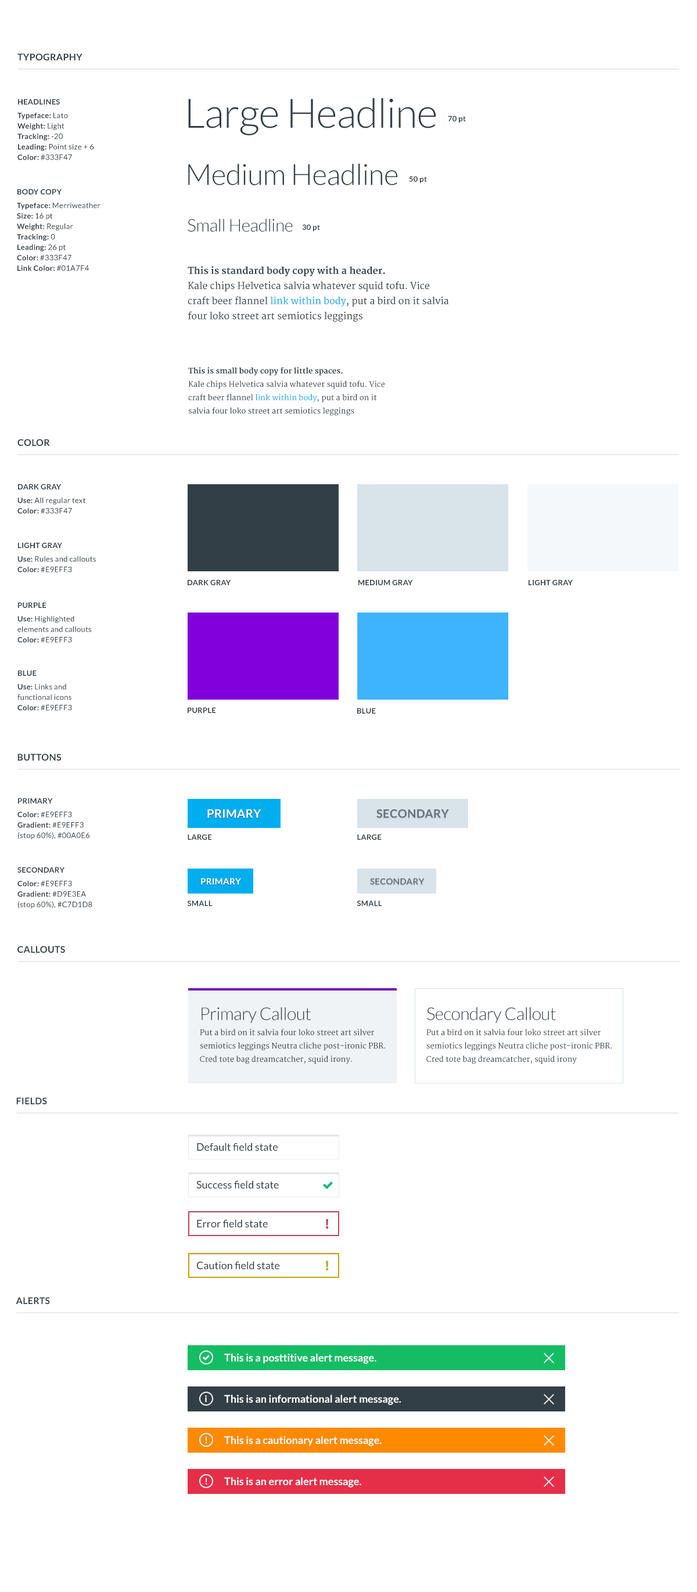
<style>
.page{position:relative;width:697px;height:1592px;background:#ffffff}
.page>*{position:absolute;margin:0}
.t1{font:9.3px "Lato-Bold";letter-spacing:0.02em;color:#333f47;text-transform:uppercase}
.t2{font:7.5px/10.5px "Lato-Regular";letter-spacing:0.02em;color:#333f47}
.t3{font:7.5px/10.5px "Lato-Bold";letter-spacing:0.02em;color:#333f47;text-transform:uppercase}
.t4{font:7.5px/10.5px "Lato-Bold";letter-spacing:0.02em;color:#333f47}
.t5{font:7.5px/10.5px "Lato-Regular";letter-spacing:0.02em;color:#333f47;text-transform:uppercase}
.t6{font:40.6px "Lato-Light";letter-spacing:-0.015em;color:#333f47}
.t7{font:7.5px "Lato-Bold";letter-spacing:0.02em;color:#333f47}
.t8{font:29px "Lato-Light";letter-spacing:-0.015em;color:#333f47}
.t9{font:17.4px "Lato-Light";letter-spacing:-0.015em;color:#333f47}
.t10{font:9.3px/15.1px "Merriweather";color:#333f47}
.t11{font:9.3px/15.1px "Merriweather-Bold";color:#333f47}
.t12{font:9.3px/15.1px "Merriweather";color:#01a7f4}
.t13{font:7.5px/13.4px "Merriweather";color:#333f47}
.t14{font:7.5px/13.4px "Merriweather-Bold";color:#333f47}
.t15{font:7.5px/13.4px "Merriweather";color:#01a7f4}
.t16{font:7.5px "Lato-Bold";letter-spacing:0.02em;color:#333f47;text-transform:uppercase}
.t17{font:11.6px "Lato-Bold";letter-spacing:0.02em;color:#ffffff;text-transform:uppercase}
.t18{font:11.6px "Lato-Bold";letter-spacing:0.02em;color:#66737c;text-transform:uppercase}
.t19{font:8.7px "Lato-Bold";letter-spacing:0.02em;color:#ffffff;text-transform:uppercase}
.t20{font:8.7px "Lato-Bold";letter-spacing:0.02em;color:#66737c;text-transform:uppercase}
.t21{font:17.4px/10.5px "Lato-Light";letter-spacing:-0.02em;color:#333f47}
.t22{font:10.5px "Lato-Regular";color:#333f47}
.t23{font:13.9px "MyriadPro-Bold";color:#bb4758}
.t24{font:13.9px "MyriadPro-Bold";color:#c1a404}
.t25{font:10.5px "Lato-Bold";color:#ffffff}
.t26{font:9.3px "Lato-Bold";color:#ffffff}
</style>
<div class="page">
<p class="t1" style="left:17px;top:53px;width:65px;height:7px">Typography</p>
<p class="t2" style="left:17px;top:99px;width:77px;height:61px"><span class="t3">headlines<br></span><span class="t4">Typeface:</span> Lato<br><span class="t4">Weight: </span>Light<br><span class="t4">Tracking: </span>-20<br><span class="t4">Leading: </span>Point size + 6<br><span class="t4">Color: </span><span class="t5">#333f47</span></p>
<p class="t6" style="left:188px;top:98px;width:248px;height:37px">Large Headline</p>
<p class="t7" style="left:448px;top:116px;width:18px;height:7px">70 pt</p>
<p class="t8" style="left:188px;top:164px;width:210px;height:21px">Medium Headline</p>
<p class="t7" style="left:409px;top:176px;width:18px;height:7px">50 pt</p>
<p class="t2" style="left:17px;top:189px;width:83px;height:82px"><span class="t3">body copy<br></span><span class="t4">Typeface:</span> Merriweather<br><span class="t4">Size: </span>16 pt<br><span class="t4">Weight: </span>Regular<br><span class="t4">Tracking: </span>0<br><span class="t4">Leading: </span>26 pt<br><span class="t4">Color: </span><span class="t5">#333f47<br></span><span class="t4">Link Color: </span><span class="t5">#01a7f4</span></p>
<p class="t9" style="left:188px;top:218px;width:105px;height:14px">Small Headline</p>
<p class="t7" style="left:302px;top:224px;width:18px;height:8px">30 pt</p>
<p class="t10" style="left:188px;top:266px;width:261px;height:56px"><span class="t11">This is standard body copy with a header.<br></span>Kale chips Helvetica salvia whatever squid tofu. Vice craft beer flannel <span class="t12">link within body</span>, put a bird on it salvia four loko street art semiotics leggings</p>
<p class="t13" style="left:188px;top:367px;width:197px;height:49px"><span class="t14">This is small body copy for little spaces.<br></span>Kale chips Helvetica salvia whatever squid tofu. Vice craft beer flannel <span class="t15">link within body</span>, put a bird on it salvia four loko street art semiotics leggings</p>
<p class="t1" style="left:17px;top:439px;width:33px;height:7px">color</p>
<p class="t2" style="left:17px;top:484px;width:69px;height:30px"><span class="t3">dark gray<br></span><span class="t4">Use:</span> All regular text<br><span class="t4">Color: </span><span class="t5">#333f47</span></p>
<p class="t2" style="left:17px;top:542px;width:79px;height:31px"><span class="t3">Light gray<br></span><span class="t4">Use:</span> Rules and callouts<br><span class="t4">Color: </span><span class="t5">#e9eff3</span></p>
<p class="t16" style="left:188px;top:579px;width:43px;height:6px">dark gray</p>
<p class="t16" style="left:358px;top:579px;width:55px;height:6px">medium gray</p>
<p class="t16" style="left:528px;top:579px;width:45px;height:6px">light gray</p>
<p class="t2" style="left:17px;top:602px;width:74px;height:41px"><span class="t3">Purple<br></span><span class="t4">Use:</span> Highlighted elements and callouts<br><span class="t4">Color: </span><span class="t5">#e9eff3</span></p>
<p class="t2" style="left:17px;top:670px;width:55px;height:41px"><span class="t3">Blue<br></span><span class="t4">Use:</span> Links and functional icons<br><span class="t4">Color: </span><span class="t5">#e9eff3</span></p>
<p class="t16" style="left:188px;top:707px;width:28px;height:6px">purple</p>
<p class="t16" style="left:357px;top:708px;width:19px;height:6px">blue</p>
<p class="t1" style="left:17px;top:754px;width:44px;height:7px">buttons</p>
<p class="t2" style="left:17px;top:798px;width:72px;height:42px"><span class="t3">primary<br></span><span class="t4">Color: </span><span class="t5">#e9eff3<br></span><span class="t4">Gradient: </span><span class="t5">#e9eff3 </span>(stop 60%)<span class="t5">, #00a0e6</span></p>
<p class="t17" style="left:207px;top:809px;width:54px;height:9px">primary</p>
<p class="t18" style="left:376px;top:809px;width:73px;height:9px">secondary</p>
<p class="t16" style="left:188px;top:834px;width:24px;height:6px">Large</p>
<p class="t16" style="left:357px;top:834px;width:24px;height:6px">Large</p>
<p class="t2" style="left:17px;top:867px;width:75px;height:42px"><span class="t3">secondary<br></span><span class="t4">Color: </span><span class="t5">#e9eff3<br></span><span class="t4">Gradient: </span><span class="t5">#d9e3ea </span>(stop 60%)<span class="t5">, #c7d1d8</span></p>
<p class="t19" style="left:201px;top:878px;width:40px;height:7px">primary</p>
<p class="t20" style="left:370px;top:878px;width:54px;height:7px">secondary</p>
<p class="t16" style="left:187px;top:901px;width:26px;height:5px">small</p>
<p class="t16" style="left:357px;top:901px;width:25px;height:5px">small</p>
<p class="t1" style="left:17px;top:946px;width:48px;height:7px">callouts</p>
<p class="t13" style="left:200px;top:1007px;width:186px;height:57px"><span class="t21">Primary Callout<br></span>Put a bird on it salvia four loko street art silver semiotics leggings Neutra cliche post-ironic PBR. Cred tote bag dreamcatcher, squid irony.</p>
<p class="t13" style="left:426px;top:1007px;width:186px;height:57px"><span class="t21">Secondary Callout<br></span>Put a bird on it salvia four loko street art silver semiotics leggings Neutra cliche post-ironic PBR. Cred tote bag dreamcatcher, squid irony</p>
<p class="t1" style="left:16px;top:1097px;width:31px;height:7px">Fields</p>
<p class="t22" style="left:197px;top:1143px;width:81px;height:8px">Default field state</p>
<p class="t22" style="left:196px;top:1180px;width:83px;height:9px">Success field state</p>
<p class="t22" style="left:197px;top:1219px;width:71px;height:9px">Error field state</p>
<p class="t23" style="left:326px;top:1219px;width:3px;height:10px">!</p>
<p class="t22" style="left:196px;top:1261px;width:84px;height:9px">Caution field state</p>
<p class="t24" style="left:326px;top:1261px;width:3px;height:10px">!</p>
<p class="t1" style="left:16px;top:1297px;width:34px;height:7px">alerts</p>
<p class="t25" style="left:224px;top:1353px;width:152px;height:11px">This is a posttitive alert message.</p>
<p class="t26" style="left:205px;top:1395px;width:2px;height:7px">i</p>
<p class="t25" style="left:224px;top:1395px;width:177px;height:10px">This is an informational alert message.</p>
<p class="t26" style="left:206px;top:1437px;width:1px;height:6px">!</p>
<p class="t25" style="left:224px;top:1436px;width:157px;height:10px">This is a cautionary alert message.</p>
<p class="t26" style="left:206px;top:1478px;width:1px;height:7px">!</p>
<p class="t25" style="left:224px;top:1477px;width:137px;height:11px">This is an error alert message.</p>
</div>
